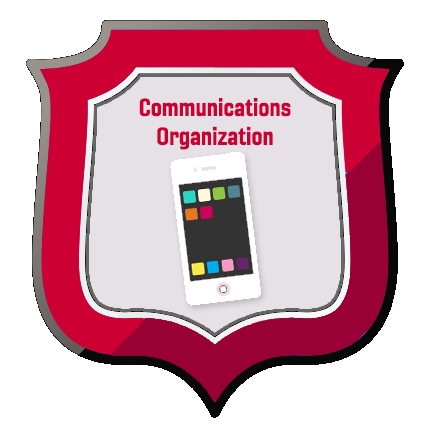
<style>
.page{position:relative;width:430px;height:438px;background:#ffffff}
.page>*{position:absolute;margin:0}
.t1{font:24px "Gineso-ConBol";color:#cc0033}
</style>
<div class="page">
<p class="t1" style="left:139px;top:98px;width:152px;height:52px;text-align:center">Communications<br>Organization</p>
</div>
